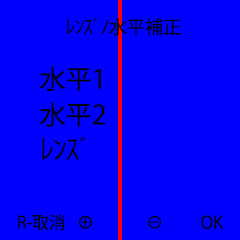
<style>
.page{position:relative;width:240px;height:240px;background:#0000ff}
.page>*{position:absolute;margin:0}
.t1{font:18px "KozGoPr6N-Regular";color:#000000}
.t2{font:26.2px "KozGoPr6N-Regular";color:#000000}
.t3{font:16.9px "KozGoPr6N-Regular";color:#000000}
</style>
<div class="page">
<p class="t1" style="left:67px;top:18px;width:114px;height:18px">ﾚﾝｽﾞ/水平補正</p>
<p class="t2" style="left:40px;top:66px;width:61px;height:26px">水平1</p>
<p class="t2" style="left:40px;top:102px;width:65px;height:25px">水平2</p>
<p class="t2" style="left:42px;top:136px;width:44px;height:25px">ﾚﾝｽﾞ</p>
<p class="t3" style="left:18px;top:214px;width:47px;height:17px">R-取消</p>
<p class="t3" style="left:79px;top:215px;width:13px;height:14px">⊕</p>
<p class="t3" style="left:148px;top:215px;width:13px;height:14px">⊖</p>
<p class="t3" style="left:201px;top:215px;width:23px;height:14px">OK</p>
</div>
